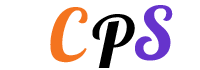
<style>
.page{position:relative;width:200px;height:70px;background:#ffffff}
.page>*{position:absolute;margin:0}
.t1{font:72px "Lobster";color:#6633cc}
.t2{font:72px "Lobster";color:#f4741f}
.t3{font:72px "Lobster";color:#000000}
</style>
<div class="page">
<p class="t1" style="left:135px;top:5px;width:38px;height:56px">S</p>
<p class="t2" style="left:50px;top:7px;width:38px;height:56px">C</p>
<p class="t3" style="left:92px;top:14px;width:43px;height:54px">P</p>
</div>
